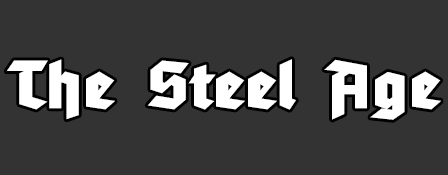
<style>
.page{position:relative;width:448px;height:175px;background:#333333}
.page>*{position:absolute;margin:0}
.t1{font:65px "TannenbergFett";letter-spacing:0.025em;color:#ffffff;scale:1.13 1}
</style>
<div class="page">
<p class="t1" style="left:6px;top:59px;width:435px;height:61px">The Steel Age</p>
</div>
